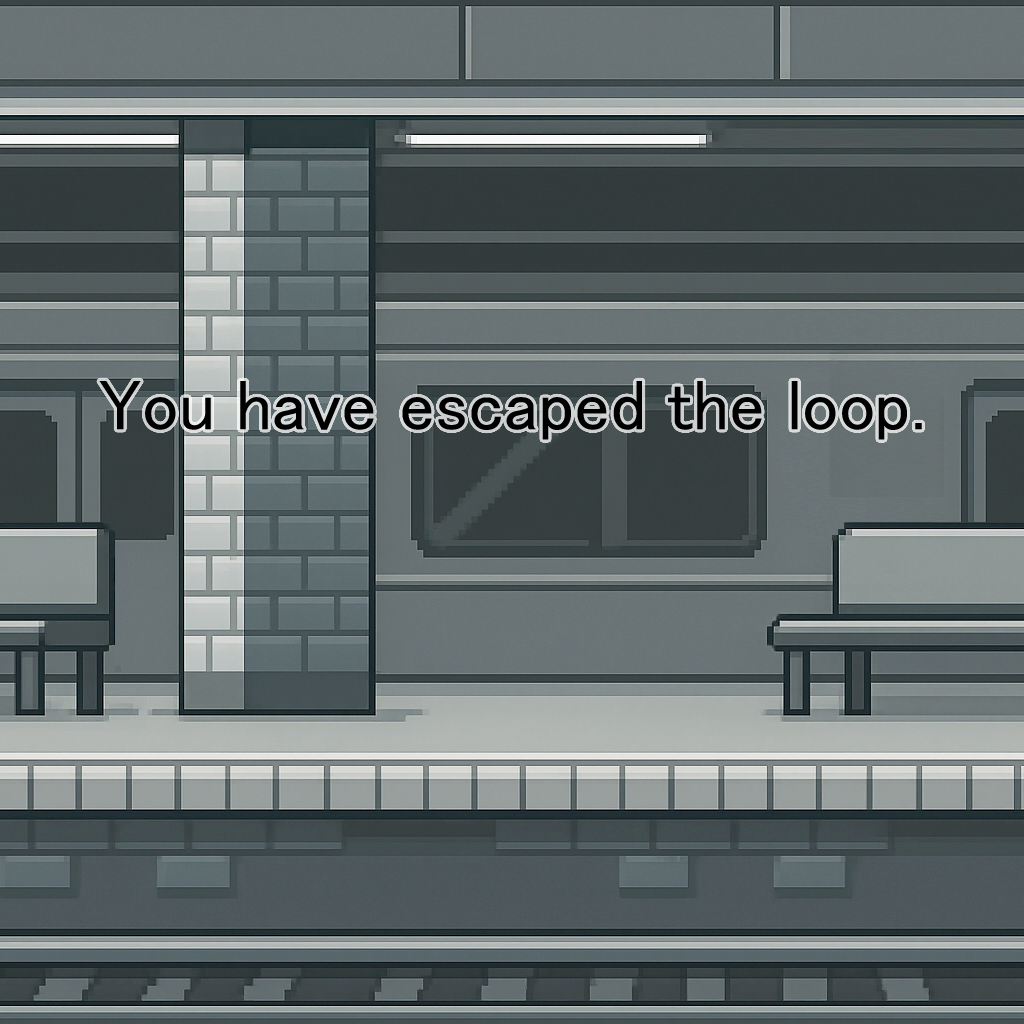
<style>
.page{position:relative;width:1024px;height:1024px}
.page>*{position:absolute;margin:0}
.t1{font:72px "MS-PGothic";color:#000000}
</style>
<div class="page">
<p class="t1" style="left:99px;top:381px;width:823px;height:59px">You have escaped the loop.</p>
</div>
